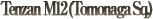
<style>
.page{position:relative;width:153px;height:19px;background:#ffffff}
.page>*{position:absolute;margin:0}
.t1{font:18px "RyuminPro-ExBold";letter-spacing:-0.145em;color:#4a3f32;font-weight:bold;scale:0.8 1}
</style>
<div class="page">
<p class="t1" style="left:0px;top:1px;width:153px;height:18px">Tenzan M12 (Tomonaga Sq.)</p>
</div>
